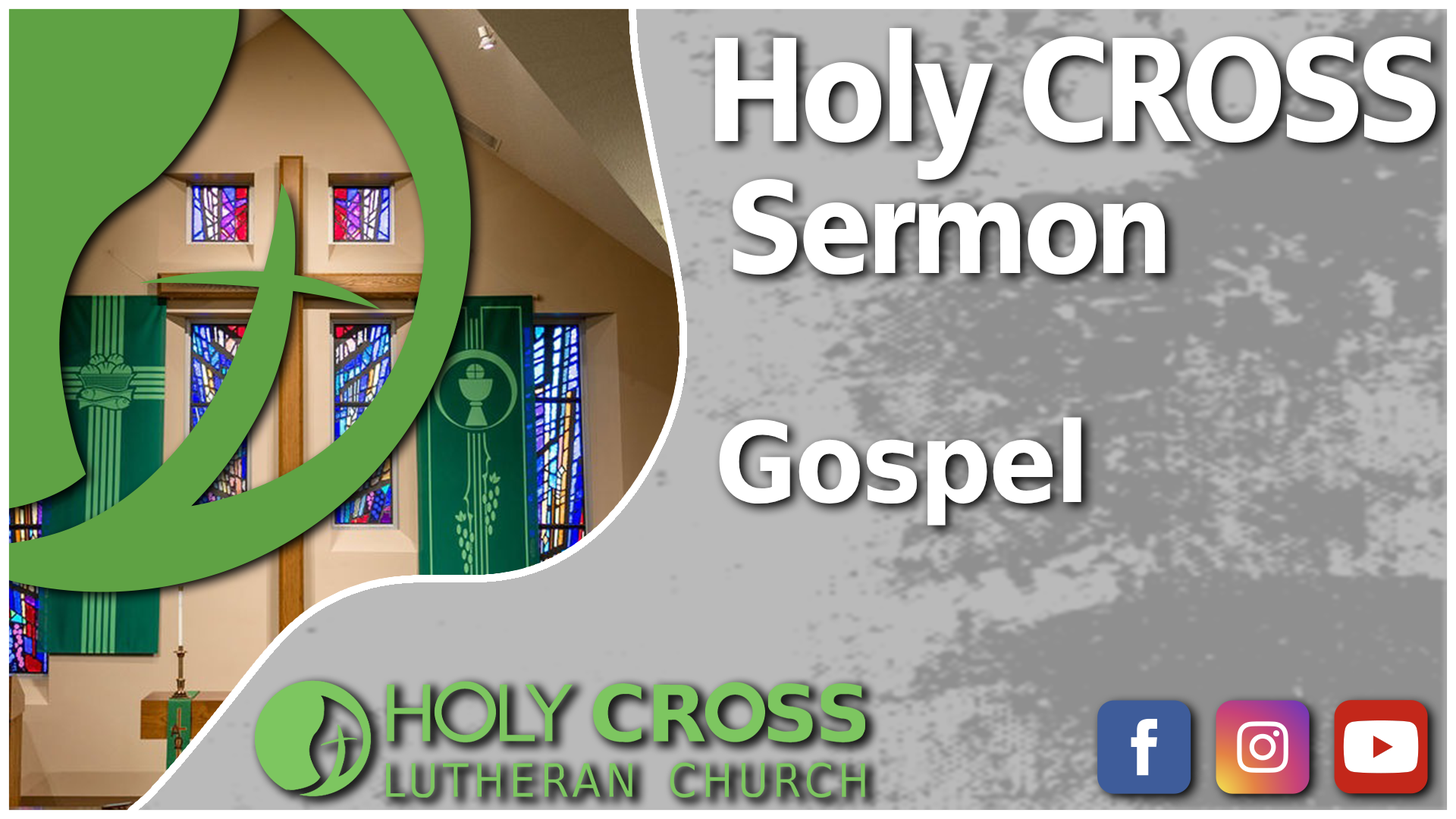
<style>
.page{position:relative;width:1456px;height:819px}
.page>*{position:absolute;margin:0}
.t1{font:147px "PMNCaeciliaSansText-Blk";letter-spacing:-0.025em;color:#ffffff;scale:0.91 1}
.t2{font:132.1px "PMNCaeciliaSansText-Blk";letter-spacing:-0.025em;color:#ffffff;scale:0.91 1}
.t3{font:111.2px "DejaVuSans-Bold";letter-spacing:-0.025em;color:#ffffff;scale:0.91 1}
</style>
<div class="page">
<p class="t1" style="left:714px;top:28px;width:722px;height:152px">Holy CROSS</p>
<p class="t2" style="left:733px;top:179px;width:433px;height:96px">Sermon</p>
<p class="t3" style="left:719px;top:417px;width:362px;height:109px">Gospel</p>
</div>
